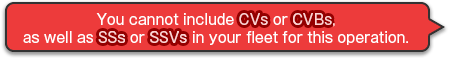
<style>
.page{position:relative;width:450px;height:58px;background:#ed3b3b}
.page>*{position:absolute;margin:0}
.t1{font:14px/18px "GothicMB101Pro-Regular";color:#ffffff}
.t2{font:14px/18px "GothicMB101Pro-Regular";color:#ffd3d3}
</style>
<div class="page">
<p class="t1" style="left:23px;top:13px;width:385px;height:32px;text-align:center">You cannot include <span class="t2">CVs</span> or <span class="t2">CVBs</span>,<br>as well as <span class="t2">SSs</span> or <span class="t2">SSVs</span> in your fleet for this operation.</p>
<p class="t1" style="left:23px;top:13px;width:385px;height:32px;text-align:center">You cannot include <span class="t2">CVs</span> or <span class="t2">CVBs,<br></span>as well as <span class="t2">SSs</span> or <span class="t2">SSVs</span> in your fleet for this operation.</p>
</div>
